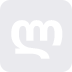
<style>
.page{position:relative;width:72px;height:72px;background:#eaeaee}
.page>*{position:absolute;margin:0}
.t1{font:54.2px "HelveticaNeue-Bold";color:#ffffff}
</style>
<div class="page">
<p class="t1" style="left:11px;top:20px;width:52px;height:39px">ლ</p>
</div>
